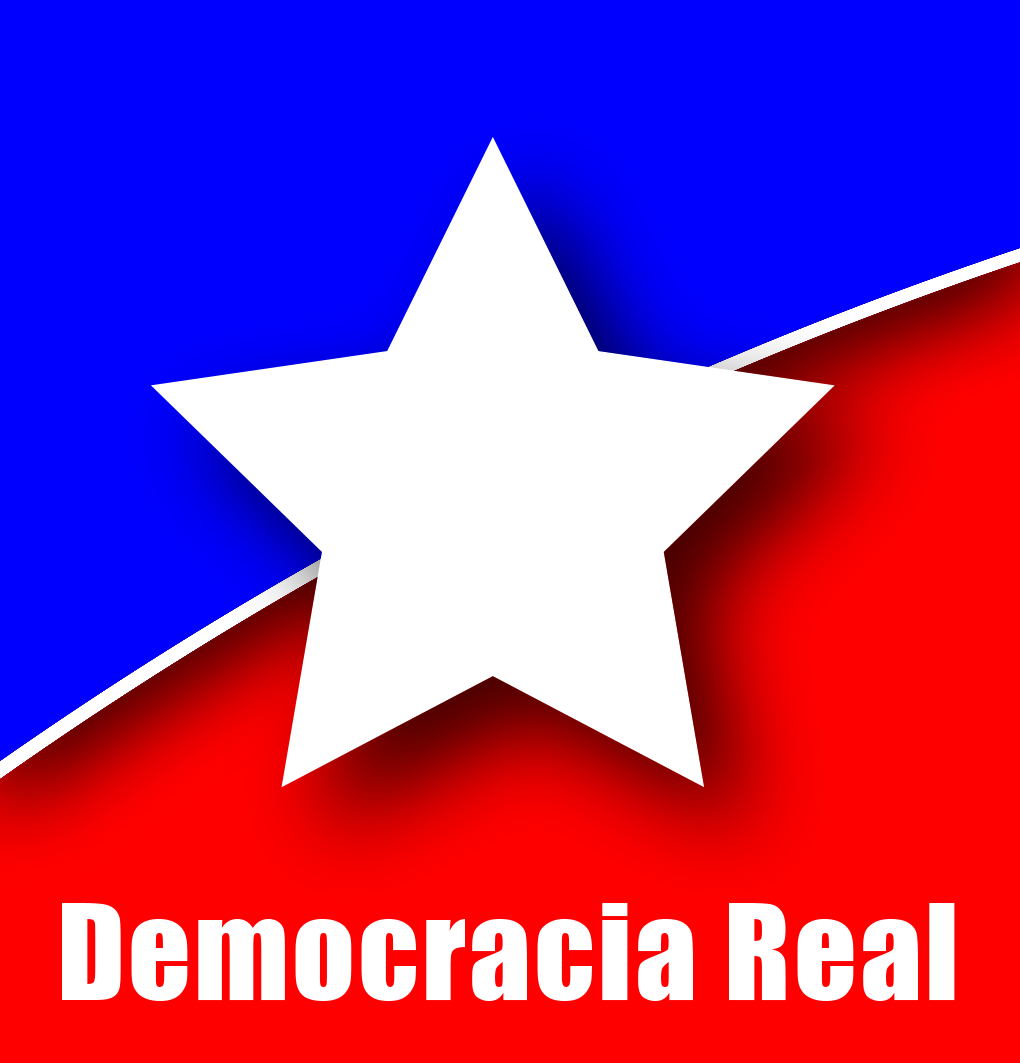
<style>
.page{position:relative;width:1020px;height:1063px;background:#0000ff}
.page>*{position:absolute;margin:0}
.t1{font:123px "Impact";letter-spacing:0.025em;color:#ffffff}
</style>
<div class="page">
<p class="t1" style="left:62px;top:903px;width:893px;height:98px">Democracia Real</p>
</div>
